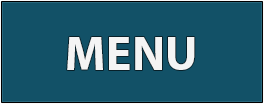
<style>
.page{position:relative;width:264px;height:104px;background:#125167}
.page>*{position:absolute;margin:0}
.t1{font:48px "MyriadHebrew-Bold";color:#f4f4f4}
</style>
<div class="page">
<p class="t1" style="left:67px;top:37px;width:128px;height:33px">MENU</p>
</div>
